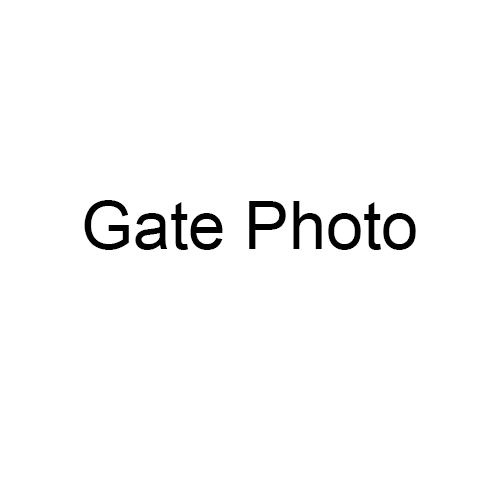
<style>
.page{position:relative;width:500px;height:500px;background:#ffffff}
.page>*{position:absolute;margin:0}
.t1{font:66.7px "ArialMT";color:#000000}
</style>
<div class="page">
<p class="t1" style="left:84px;top:200px;width:332px;height:50px">Gate Photo</p>
</div>
